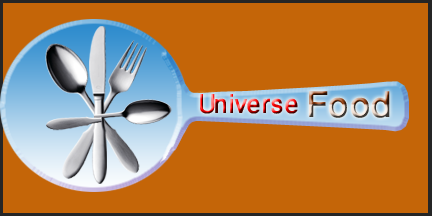
<style>
.page{position:relative;width:432px;height:216px;background:#c46508}
.page>*{position:absolute;margin:0}
.t1{font:36.9px "WinSoftPro-Medium";scale:0.96 1}
.t2{font:50.1px "WinSoftPro-Medium";scale:1.03 1}
</style>
<div class="page">
<p class="t1" style="left:200px;top:94px;width:98px;height:20px">Universe</p>
<p class="t2" style="left:309px;top:91px;width:81px;height:27px">Food</p>
</div>
